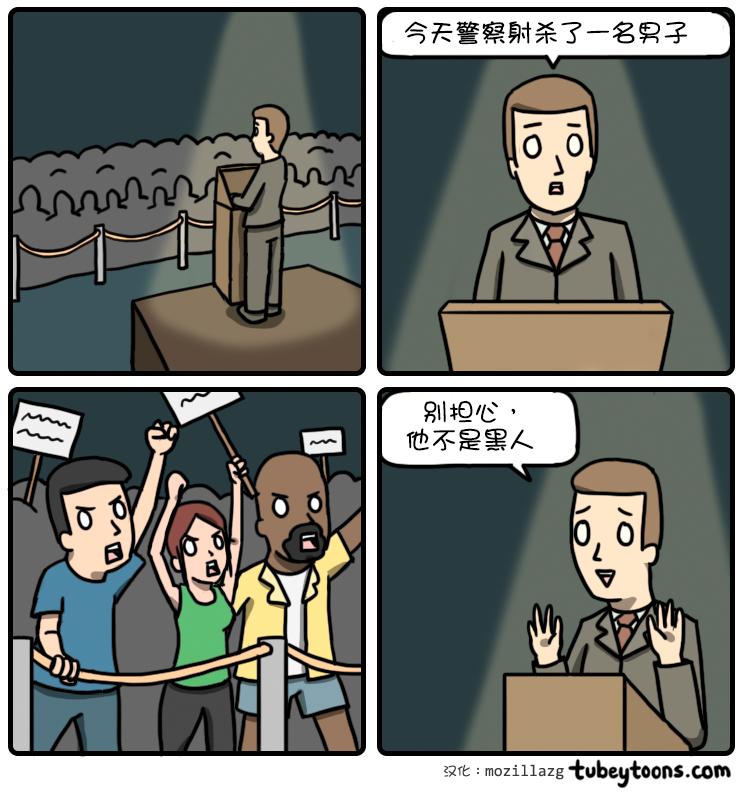
<style>
.page{position:relative;width:742px;height:793px}
.page>*{position:absolute;margin:0}
.t1{font:26px "DFGirl";color:#000000}
.t2{font:26px/28px "DFGirl";color:#000000}
</style>
<div class="page">
<p class="t1" style="left:404px;top:21px;width:284px;height:24px">今天警察射杀了一名男子</p>
<p class="t2" style="left:406px;top:400px;width:128px;height:52px">别担心，<br>他不是黑人</p>
</div>
